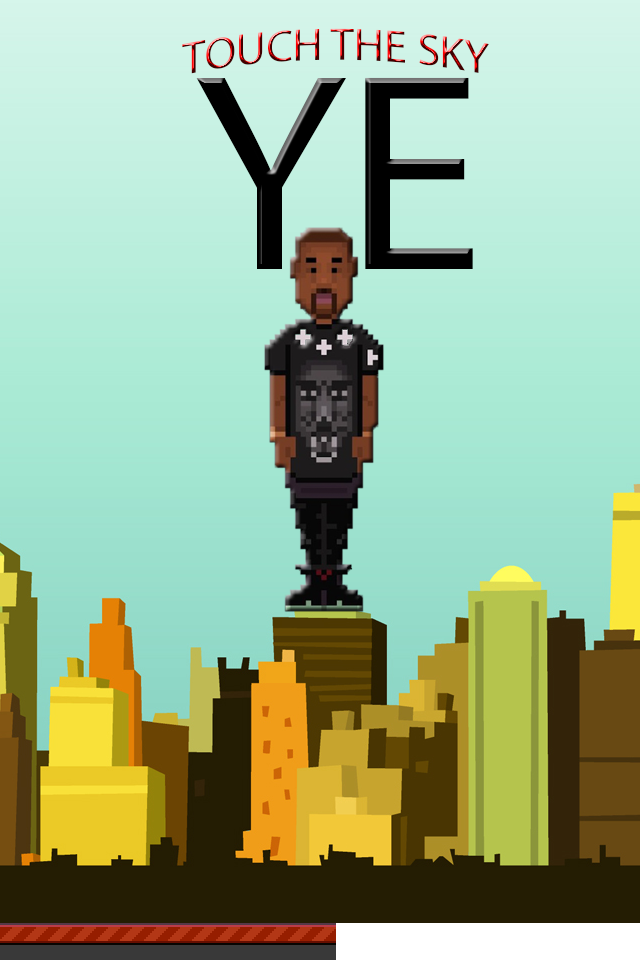
<style>
.page{position:relative;width:640px;height:960px}
.page>*{position:absolute;margin:0}
.t1{font:45.8px "MyriadPro-Regular"}
.t2{font:283.3px "MyriadPro-Regular";color:#000000}
</style>
<div class="page">
<p class="t1" style="left:182px;top:28px;width:307px;height:46px">TOUCH THE SKY</p>
<p class="t2" style="left:196px;top:77px;width:277px;height:192px">YE</p>
</div>
